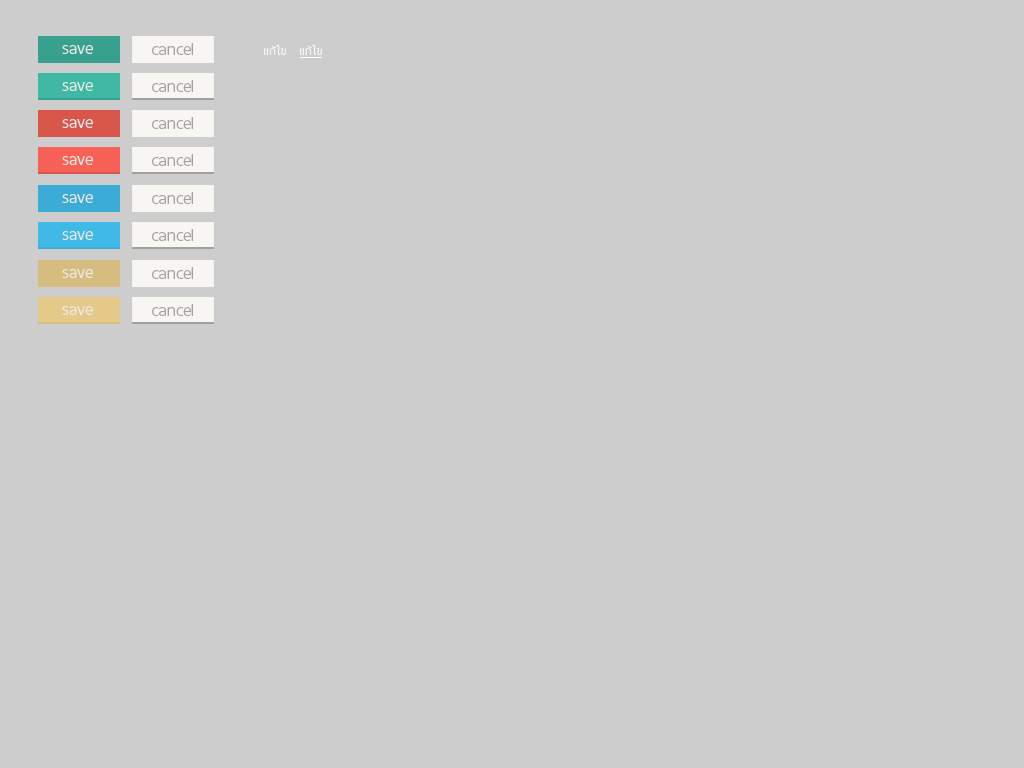
<style>
.page{position:relative;width:1024px;height:768px;background:#cdcdcd}
.page>*{position:absolute;margin:0}
.t1{font:24px "ThaiSansNeue-Light";letter-spacing:-0.005em;color:#ebeae8}
.t2{font:24px "ThaiSansNeue-Light";color:#a2a1a0}
.t3{font:16px "ThaiSansNeue-UltraLight";letter-spacing:0.025em;color:#fefefe}
</style>
<div class="page">
<p class="t1" style="left:62px;top:45px;width:31px;height:9px">save</p>
<p class="t2" style="left:152px;top:43px;width:41px;height:12px">cancel</p>
<p class="t3" style="left:264px;top:45px;width:22px;height:10px">แก้ไข</p>
<p class="t3" style="left:300px;top:45px;width:22px;height:10px">แก้ไข</p>
<p class="t1" style="left:62px;top:82px;width:31px;height:9px">save</p>
<p class="t2" style="left:152px;top:80px;width:41px;height:12px">cancel</p>
<p class="t1" style="left:62px;top:119px;width:31px;height:9px">save</p>
<p class="t2" style="left:152px;top:117px;width:41px;height:12px">cancel</p>
<p class="t1" style="left:62px;top:156px;width:31px;height:9px">save</p>
<p class="t2" style="left:152px;top:154px;width:41px;height:12px">cancel</p>
<p class="t1" style="left:62px;top:194px;width:31px;height:9px">save</p>
<p class="t2" style="left:152px;top:192px;width:41px;height:12px">cancel</p>
<p class="t1" style="left:62px;top:231px;width:31px;height:9px">save</p>
<p class="t2" style="left:152px;top:229px;width:41px;height:12px">cancel</p>
<p class="t1" style="left:62px;top:269px;width:31px;height:9px">save</p>
<p class="t2" style="left:152px;top:267px;width:41px;height:12px">cancel</p>
<p class="t2" style="left:152px;top:304px;width:41px;height:12px">cancel</p>
<p class="t1" style="left:62px;top:306px;width:31px;height:9px">save</p>
</div>
